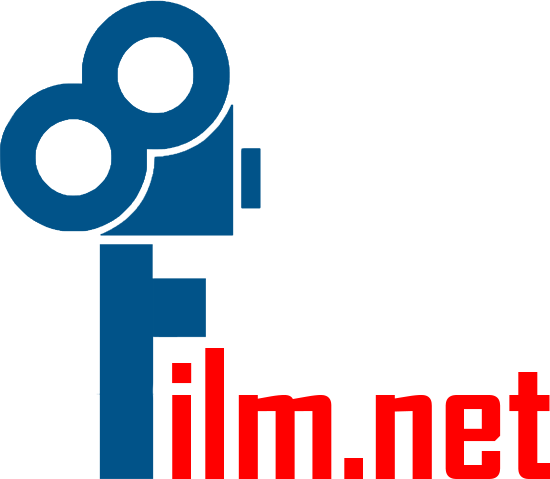
<style>
.page{position:relative;width:550px;height:479px;background:#ffffff}
.page>*{position:absolute;margin:0}
.t1{font:170.5px "AgencyFB-Bold";color:#ff0000}
</style>
<div class="page">
<p class="t1" style="left:172px;top:348px;width:378px;height:131px">ilm.net</p>
</div>
